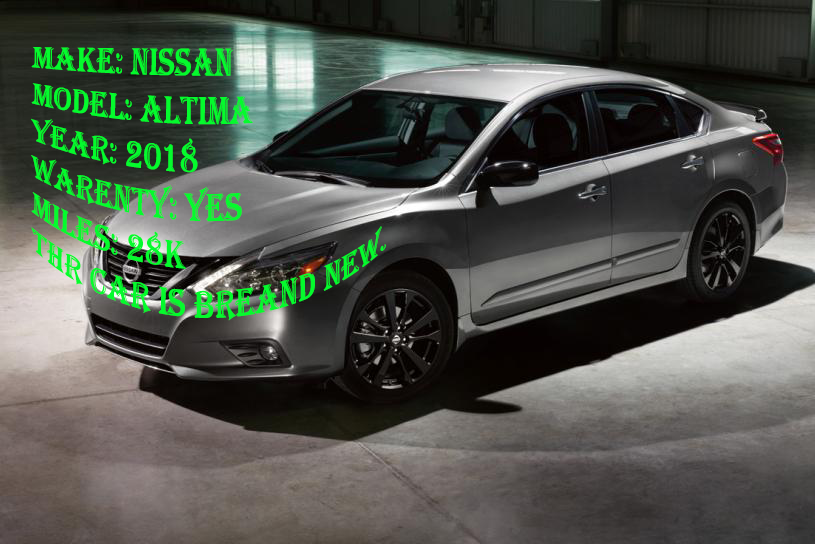
<style>
.page{position:relative;width:815px;height:544px}
.page>*{position:absolute;margin:0}
.t1{font:30px "Algerian";color:#04fb2d}
</style>
<div class="page">
<p class="t1" style="left:31px;top:47px;width:355px;height:274px">Make: Nissan<br>model: Altima<br>year: 2018<br>warenty: yes<br>Miles: 28k<br>thr car is breand new.</p>
</div>
